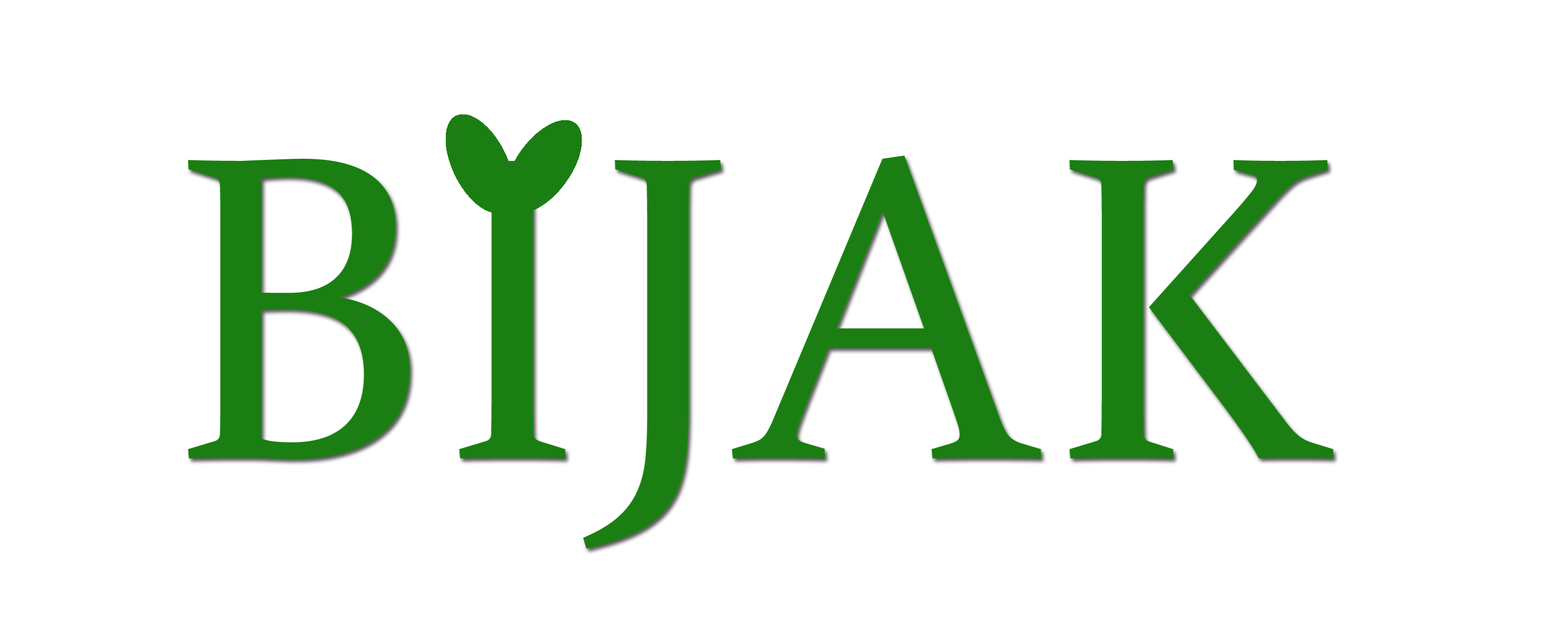
<style>
.page{position:relative;width:1568px;height:627px;background:#ffffff}
.page>*{position:absolute;margin:0}
.t1{font:435.6px "Constantia";letter-spacing:0.025em;color:#1a7e13;text-transform:uppercase}
</style>
<div class="page">
<p class="t1" style="left:188px;top:155px;width:1146px;height:394px">BIJAK</p>
</div>
